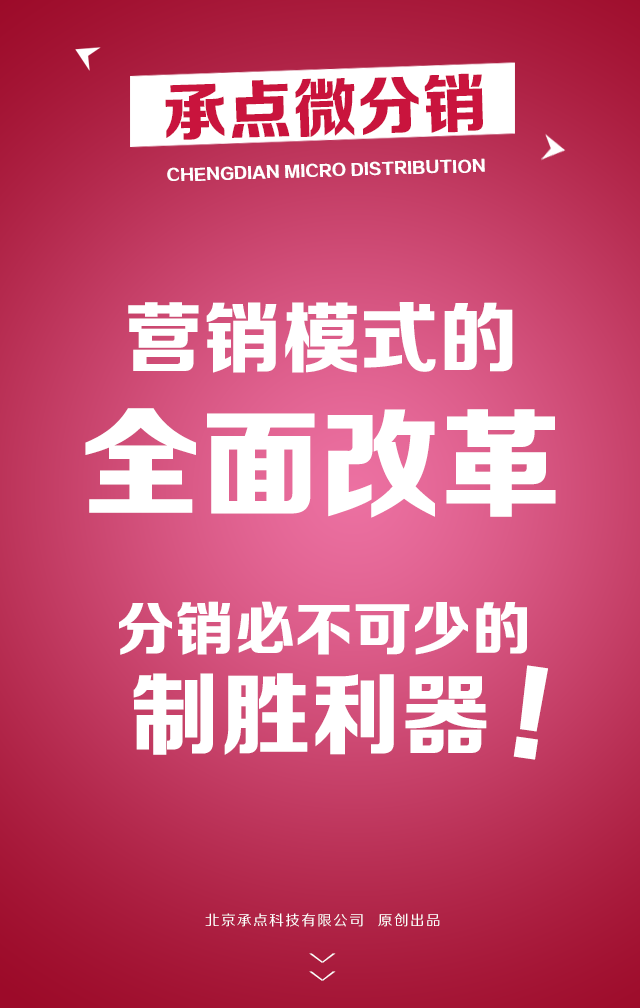
<style>
.page{position:relative;width:640px;height:1008px}
.page>*{position:absolute;margin:0}
.t1{font:64.4px "FZZDHJW--GB1-0";letter-spacing:0.005em;color:#c9143d;text-transform:uppercase}
.t2{font:15.6px "FZZDHJW--GB1-0";letter-spacing:0.005em;color:#ffffff;text-transform:uppercase}
.t3{font:77.8px "FZZDHJW--GB1-0";letter-spacing:0.005em;color:#ffffff;text-transform:uppercase}
.t4{font:118.9px "FZZDHJW--GB1-0";letter-spacing:0.005em;color:#ffffff;text-transform:uppercase}
.t5{font:58.6px "FZZDHJW--GB1-0";letter-spacing:0.005em;color:#ffffff;text-transform:uppercase}
.t6{font:109px "FZZDHJW--GB1-0";letter-spacing:0.005em;color:#ffffff;text-transform:uppercase}
.t7{font:90.2px "FZZDHJW--GB1-0";letter-spacing:0.005em;color:#ffffff;text-transform:uppercase}
.t8{font:14.2px "FZZHJW--GB1-0";letter-spacing:0.1em;color:#ffffff;text-transform:uppercase}
.t9{font:36.8px "FZZXHJW--GB1-0";letter-spacing:0.5em;color:#ffffff;text-transform:uppercase;scale:0.44 1}
</style>
<div class="page">
<p class="t1" style="left:165px;top:73px;width:318px;height:67px;rotate:-2deg">承点微分销</p>
<p class="t2" style="left:167px;top:158px;width:318px;height:23px;rotate:-2deg">CHENGDIAN Micro distribution</p>
<p class="t3" style="left:128px;top:302px;width:385px;height:71px">营销模式的</p>
<p class="t4" style="left:85px;top:408px;width:471px;height:110px">全面改革</p>
<p class="t5" style="left:119px;top:601px;width:408px;height:54px">分销必不可少的</p>
<p class="t6" style="left:513px;top:665px;width:35px;height:95px;rotate:8deg">!</p>
<p class="t7" style="left:133px;top:673px;width:354px;height:82px">制胜利器</p>
<p class="t8" style="left:205px;top:913px;width:235px;height:14px">北京承点科技有限公司  原创出品</p>
<p class="t9" style="left:309px;top:953px;width:27px;height:28px;rotate:90deg">&gt;&gt;</p>
</div>
